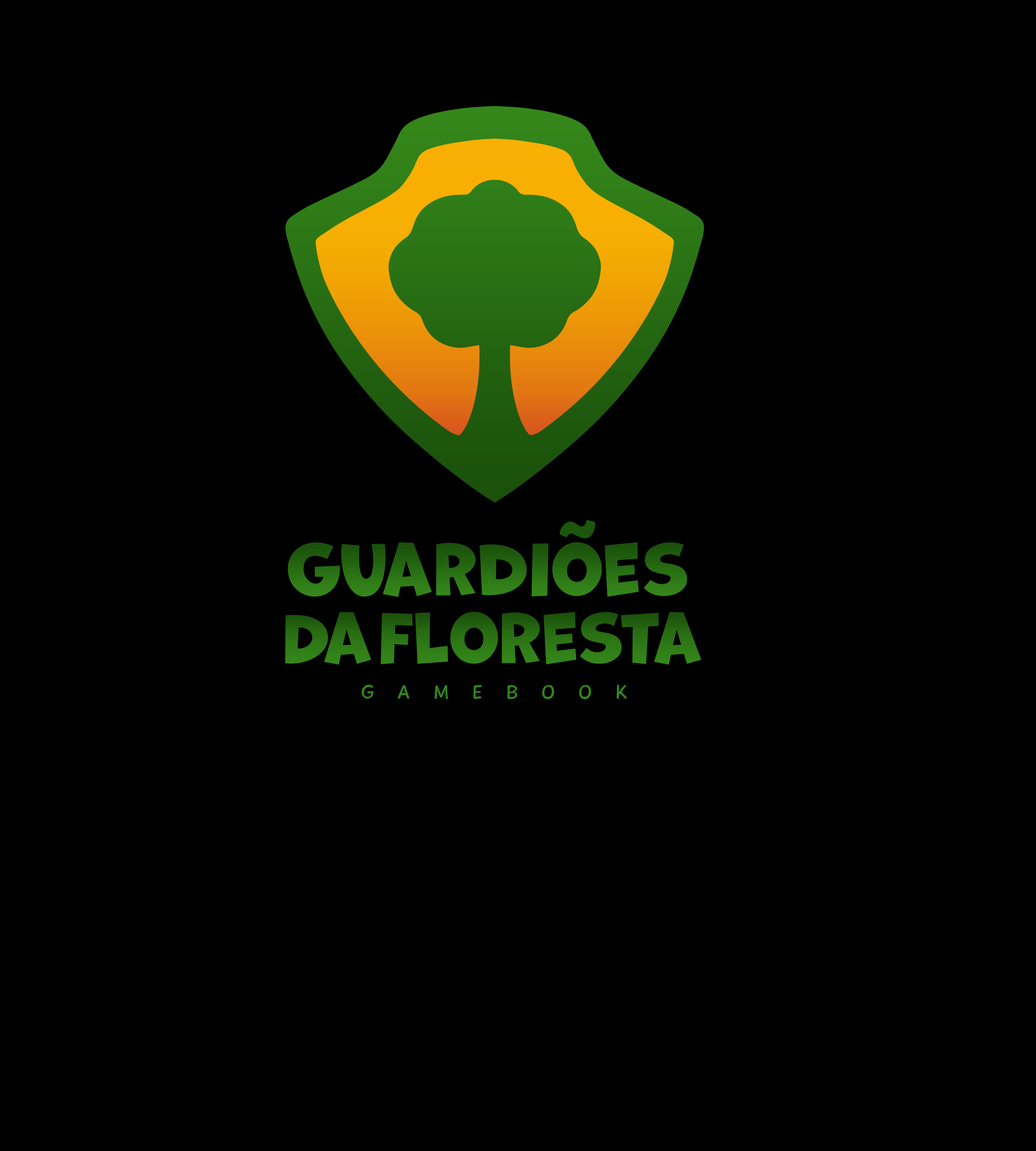
<style>
.page{position:relative;width:1036px;height:1151px;background:#000000}
.page>*{position:absolute;margin:0}
.t1{font:66.9px "Marvin";color:#1c550c}
.t2{font:67.4px "Marvin";letter-spacing:0.01em}
.t3{font:67.4px "Marvin";letter-spacing:-0.03em}
.t4{font:67.4px "Marvin";letter-spacing:-0.05em}
.t5{font:67.4px "Marvin";letter-spacing:0.03em}
.t6{font:67.4px "Marvin"}
.t7{font:67.4px "Marvin";letter-spacing:0.04em}
.t8{font:65px "Marvin";letter-spacing:-0.04em;color:#2c7515}
.t9{font:65px "Marvin";letter-spacing:0.02em;color:#2b7215}
.t10{font:65px "Marvin";color:#2b7215}
.t11{font:19.6px "PlaytimeWithHotToddies";letter-spacing:1.2em;color:#33851a}
</style>
<div class="page">
<p class="t1" style="left:559px;top:519px;width:37px;height:19px">~</p>
<p class="t2" style="left:288px;top:542px;width:400px;height:55px"><span class="t3">G</span><span class="t4">u</span><span class="t5">a</span>rd<span class="t6">io</span><span class="t7">es</span></p>
<p class="t8" style="left:285px;top:612px;width:86px;height:53px">Da</p>
<p class="t9" style="left:381px;top:611px;width:321px;height:54px"><span class="t10">Flo</span>resta</p>
<p class="t11" style="left:362px;top:684px;width:265px;height:15px">GAMEBOOK</p>
</div>
